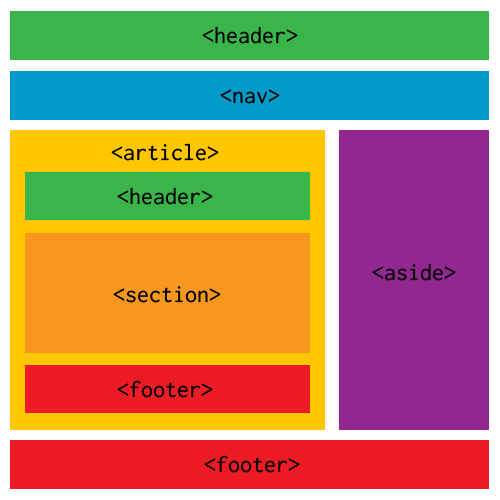
<style>
.page{position:relative;width:500px;height:500px}
.page>*{position:absolute;margin:0}
.t1{font:24px "Inconsolata";color:#000000}
</style>
<div class="page">
<p class="t1" style="left:202px;top:26px;width:96px;height:18px">&lt;header&gt;</p>
<p class="t1" style="left:220px;top:89px;width:60px;height:15px">&lt;nav&gt;</p>
<p class="t1" style="left:111px;top:143px;width:108px;height:18px">&lt;article&gt;</p>
<p class="t1" style="left:117px;top:187px;width:96px;height:18px">&lt;header&gt;</p>
<p class="t1" style="left:372px;top:263px;width:84px;height:18px">&lt;aside&gt;</p>
<p class="t1" style="left:113px;top:286px;width:108px;height:17px">&lt;section&gt;</p>
<p class="t1" style="left:117px;top:380px;width:96px;height:18px">&lt;footer&gt;</p>
<p class="t1" style="left:204px;top:455px;width:96px;height:18px">&lt;footer&gt;</p>
</div>
